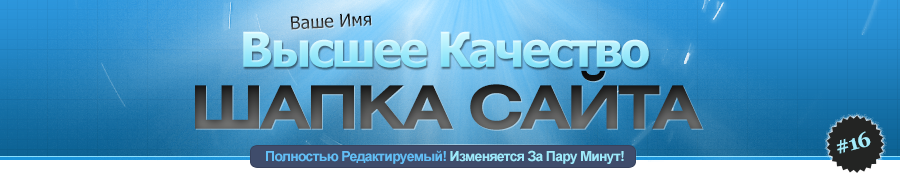
<style>
.page{position:relative;width:900px;height:175px}
.page>*{position:absolute;margin:0}
.t1{font:18px "Tahoma"}
.t2{font:48px "Tahoma-Bold";letter-spacing:-0.05em}
.t3{font:60px "HeliosExt-Bold";letter-spacing:-0.05em;text-transform:uppercase}
.t4{font:21px "Georgia-Bold";letter-spacing:-0.05em;color:#a5ecfb}
.t5{font:14px "Arial-BoldMT";letter-spacing:-0.05em;color:#9de9fb}
.t6{font:14px "Arial-BoldMT";letter-spacing:-0.05em;color:#62bef5}
</style>
<div class="page">
<p class="t1" style="left:290px;top:13px;width:82px;height:17px;rotate:-3deg">Ваше Имя</p>
<p class="t2" style="left:243px;top:31px;width:406px;height:37px">Высшее Качество</p>
<p class="t3" style="left:195px;top:70px;width:508px;height:60px">ШАПКА САЙТА</p>
<p class="t4" style="left:836px;top:131px;width:35px;height:23px;rotate:-15deg">#16</p>
<p class="t5" style="left:266px;top:150px;width:358px;height:14px"><span class="t6">Полностью Редактируемый! </span>Изменяется За Пару Минут!</p>
</div>
